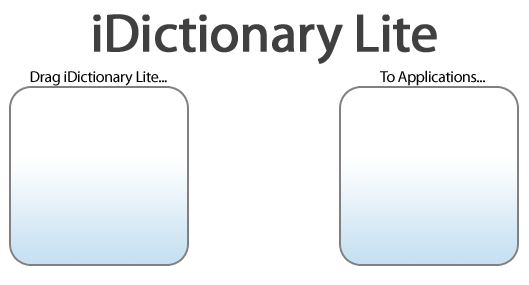
<style>
.page{position:relative;width:529px;height:285px;background:#ffffff}
.page>*{position:absolute;margin:0}
.t1{font:54.2px "MyriadPro-Regular";letter-spacing:-0.02em;color:#404040;font-weight:bold}
.t2{font:15.8px "MyriadPro-Regular";letter-spacing:-0.02em;color:#000000}
</style>
<div class="page">
<p class="t1" style="left:93px;top:14px;width:344px;height:50px">iDictionary Lite</p>
<p class="t2" style="left:30px;top:71px;width:137px;height:15px">Drag iDictionary Lite...</p>
<p class="t2" style="left:380px;top:70px;width:105px;height:16px">To Applications...</p>
</div>
